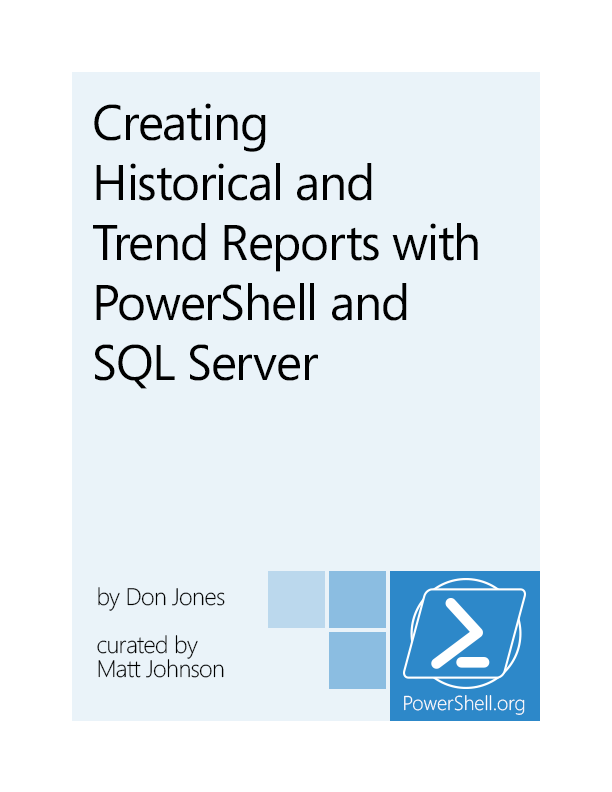
<style>
.page{position:relative;width:612px;height:792px;background:#eaf3f9}
.page>*{position:absolute;margin:0}
.t1{font:50px/60px "Segoe";letter-spacing:-0.025em;color:#000000}
.t2{font:24px/24px "Segoe-Light";letter-spacing:-0.025em;color:#000000}
</style>
<div class="page">
<p class="t1" style="left:93px;top:103px;width:385px;height:286px">Creating<br>Historical and<br>Trend Reports with<br>PowerShell and<br>SQL Server</p>
<p class="t2" style="left:97px;top:587px;width:128px;height:91px">by Don Jones<br><br>curated by<br>Matt Johnson</p>
</div>
